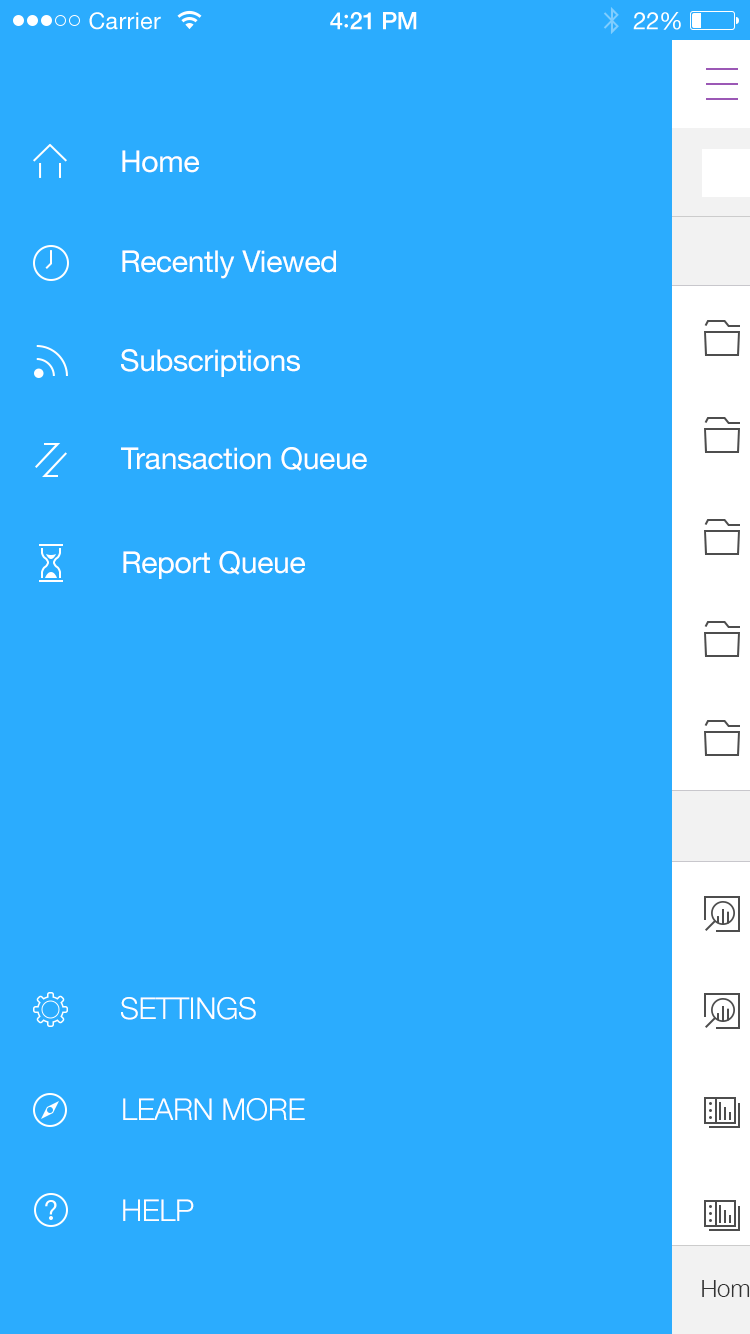
<style>
.page{position:relative;width:750px;height:1334px;background:#2bacfe}
.page>*{position:absolute;margin:0}
.t1{font:23px "HelveticaNeue";letter-spacing:0.02em;color:#ffffff}
.t2{font:24px "HelveticaNeue-Medium";letter-spacing:-0.02em;color:#ffffff}
.t3{font:26px "Avenir-Medium";letter-spacing:-0.02em;color:#ffffff}
.t4{font:24px "HelveticaNeue";letter-spacing:-0.02em;color:#ffffff}
.t5{font:30px "HelveticaNeue";letter-spacing:-0.01em;color:#ffffff}
.t6{font:30px "HelveticaNeue-Light";letter-spacing:-0.01em;color:#ffffff}
</style>
<div class="page">
<p class="t1" style="left:89px;top:12px;width:72px;height:18px">Carrier</p>
<p class="t2" style="left:330px;top:12px;width:87px;height:18px">4<span class="t3">:</span>21 PM</p>
<p class="t4" style="left:633px;top:12px;width:48px;height:18px">22%</p>
<p class="t5" style="left:122px;top:150px;width:77px;height:23px">Home</p>
<p class="t5" style="left:122px;top:250px;width:214px;height:29px">Recently Viewed</p>
<p class="t5" style="left:121px;top:349px;width:179px;height:28px">Subscriptions</p>
<p class="t5" style="left:121px;top:447px;width:246px;height:24px">Transaction Queue</p>
<p class="t5" style="left:123px;top:551px;width:182px;height:28px">Report Queue</p>
<p class="t6" style="left:121px;top:997px;width:135px;height:23px">SETTINGS</p>
<p class="t6" style="left:123px;top:1098px;width:182px;height:23px">LEARN MORE</p>
<p class="t6" style="left:123px;top:1199px;width:71px;height:22px">HELP</p>
</div>
